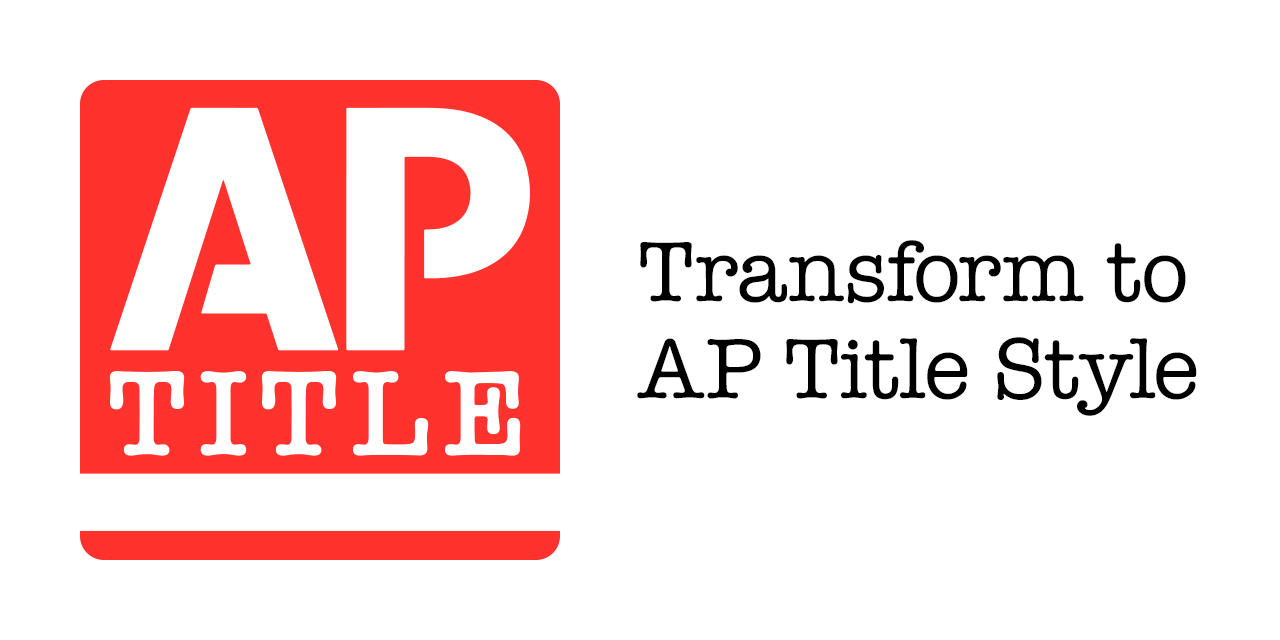
<style>
.page{position:relative;width:1280px;height:640px;background:#ffffff}
.page>*{position:absolute;margin:0}
.t1{font:88px/97px "AmericanTypewriter";color:#000000}
</style>
<div class="page">
<p class="t1" style="left:637px;top:240px;width:560px;height:176px">Transform to<br>AP Title Style</p>
</div>
